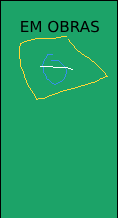
<style>
.page{position:relative;width:118px;height:218px;background:#1ca368}
.page>*{position:absolute;margin:0}
.t1{font:15.2px "DejaVuSans";color:#000000}
.t2{font:15.2px "DejaVuSans";color:#ffd635}
</style>
<div class="page">
<p class="t1" style="left:21px;top:20px;width:78px;height:13px"><span class="t2">E</span>M OBRAS</p>
</div>
